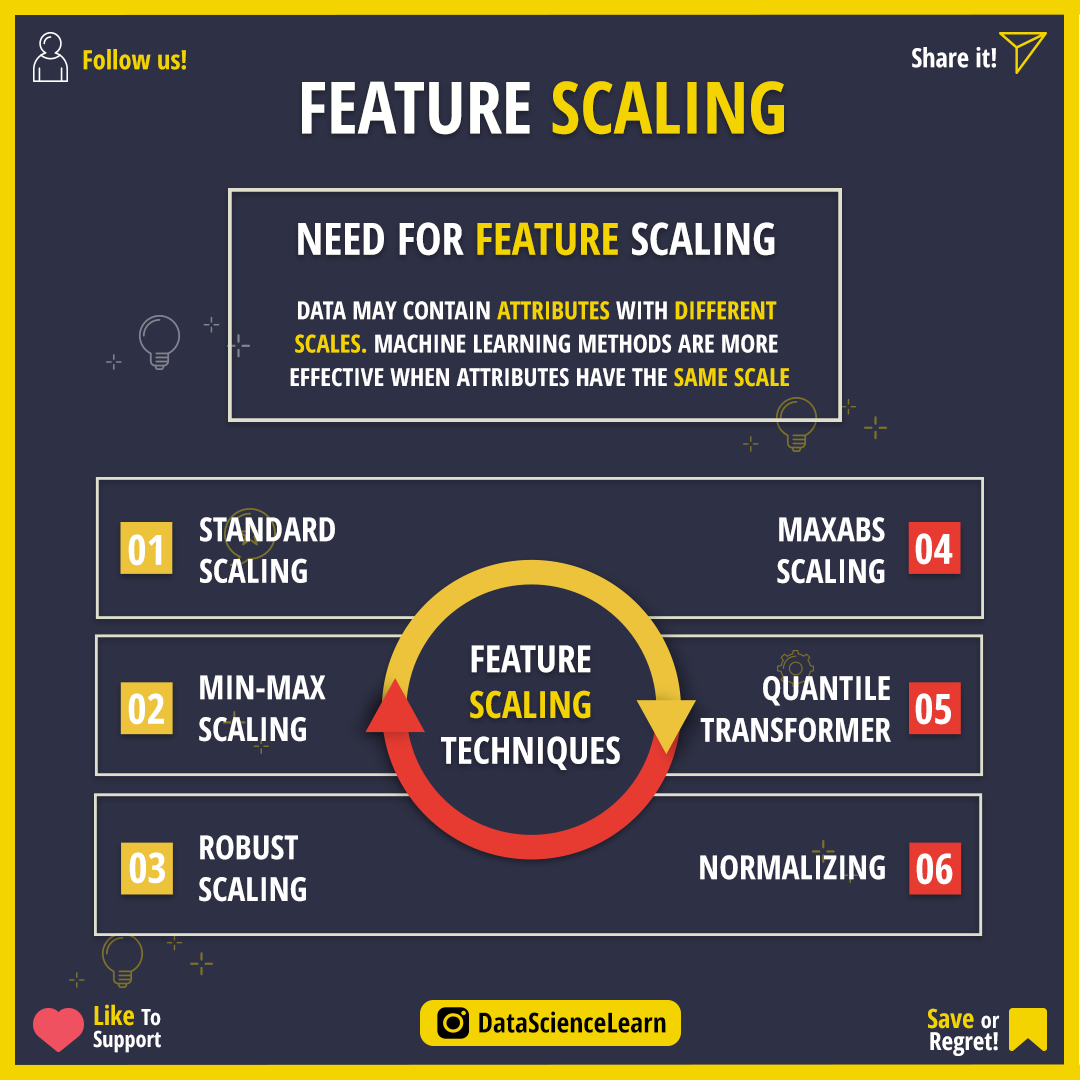
<style>
.page{position:relative;width:1080px;height:1080px;background:#2e3045}
.page>*{position:absolute;margin:0}
.t1{font:26.4px "OpenSans-CondensedBold";color:#f3d400}
.t2{font:26.4px "OpenSans-CondensedBold";color:#ffffff}
.t3{font:72.2px "OpenSans-CondensedBold";color:#fffffe}
.t4{font:72.2px "OpenSans-CondensedBold";color:#f3d400}
.t5{font:44.4px "OpenSans-CondensedBold";color:#ffffff}
.t6{font:44.4px "OpenSans-CondensedBold";color:#f3d400}
.t7{font:44.4px "OpenSans-CondensedBold";color:#fefefe}
.t8{font:25px/33.3px "OpenSans-CondensedBold";color:#ffffff}
.t9{font:25px/33.3px "OpenSans-CondensedBold";color:#f3d400}
.t10{font:33.3px/41.7px "OpenSans-CondensedBold";color:#ffffff}
.t11{font:41.7px "OpenSans-CondensedBold";color:#ffffff}
.t12{font:37.5px/45.8px "OpenSans-CondensedBold";color:#ffffff}
.t13{font:37.5px/45.8px "OpenSans-CondensedBold";color:#fffffe}
.t14{font:37.5px/45.8px "OpenSans-CondensedBold";color:#f3d400}
.t15{font:33.3px "OpenSans-CondensedBold";color:#ffffff}
.t16{font:22.2px/22.2px "OpenSans-CondensedBold";color:#ffffff}
.t17{font:26.4px/22.2px "OpenSans-CondensedBold";color:#f3d400}
.t18{font:27.8px "OpenSans-CondensedBold";color:#000000}
.t19{font:25px/22.2px "OpenSans-CondensedBold";color:#ffffff}
</style>
<div class="page">
<p class="t1" style="left:83px;top:49px;width:103px;height:21px">Follow us!</p>
<p class="t2" style="left:912px;top:47px;width:84px;height:21px">Share it!</p>
<p class="t3" style="left:302px;top:81px;width:482px;height:54px">FEATURE <span class="t4">SCALING</span></p>
<p class="t5" style="left:298px;top:222px;width:477px;height:34px">NEED FOR <span class="t6">FEATURE </span><span class="t7">SCALING</span></p>
<p class="t8" style="left:290px;top:301px;width:499px;height:86px;text-align:center">DATA MAY CONTAIN <span class="t9">ATTRIBUTES </span>WITH <span class="t9">DIFFERENT <br>SCALES.</span> MACHINE LEARNING METHODS ARE MORE <br>EFFECTIVE WHEN ATTRIBUTES HAVE THE<span class="t9"> SAME SCALE</span></p>
<p class="t10" style="left:200px;top:517px;width:135px;height:66px">STANDARD<br>SCALING</p>
<p class="t10" style="left:777px;top:517px;width:108px;height:67px;text-align:center">MAXABS<br>SCALING</p>
<p class="t11" style="left:128px;top:534px;width:34px;height:32px">01</p>
<p class="t11" style="left:915px;top:533px;width:38px;height:32px">04</p>
<p class="t12" style="left:441px;top:645px;width:179px;height:125px;text-align:center"><span class="t13">FEATURE</span><span class="t14"><br>SCALING<br></span>TECHNIQUES</p>
<p class="t10" style="left:199px;top:675px;width:127px;height:67px">MIN-MAX<br>SCALING</p>
<p class="t10" style="left:700px;top:676px;width:191px;height:66px;text-align:right">QUANTILE<br>TRANSFORMER</p>
<p class="t11" style="left:128px;top:693px;width:36px;height:32px">02</p>
<p class="t11" style="left:915px;top:693px;width:36px;height:32px">05</p>
<p class="t10" style="left:199px;top:835px;width:107px;height:67px">ROBUST<br>SCALING</p>
<p class="t11" style="left:129px;top:852px;width:36px;height:32px">03</p>
<p class="t15" style="left:700px;top:855px;width:185px;height:25px">NORMALIZING</p>
<p class="t11" style="left:916px;top:853px;width:37px;height:32px">06</p>
<p class="t16" style="left:93px;top:1004px;width:68px;height:49px"><span class="t17">Like </span>To<br>Support</p>
<p class="t18" style="left:479px;top:1011px;width:187px;height:22px">DataScienceLearn</p>
<p class="t19" style="left:928px;top:1008px;width:72px;height:48px;text-align:right"><span class="t17">Save </span><span class="t16">or<br></span>Regret!</p>
</div>
